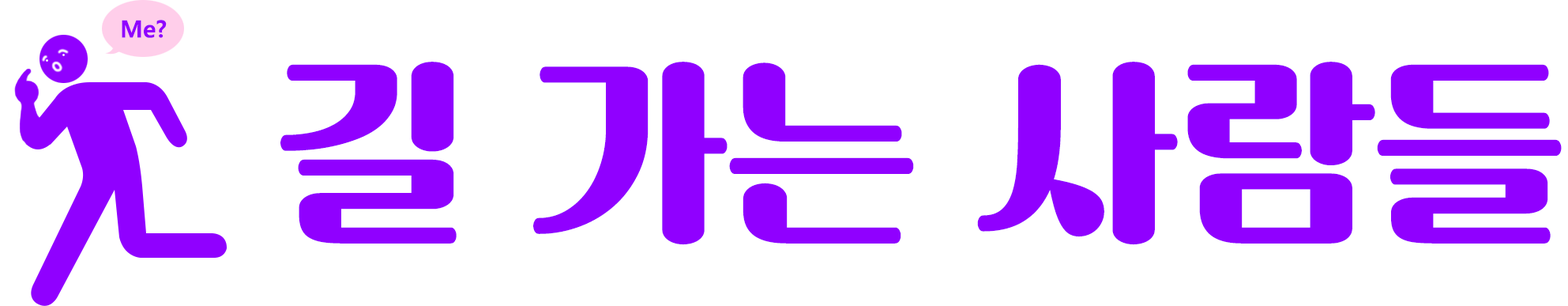
<style>
.page{position:relative;width:1568px;height:306px;background:#ffffff}
.page>*{position:absolute;margin:0}
.t1{font:197.5px "SANGJU-Gotgam";color:#9000ff}
</style>
<div class="page">
<p class="t1" style="left:280px;top:62px;width:1282px;height:183px">길 가는 사람들</p>
</div>
